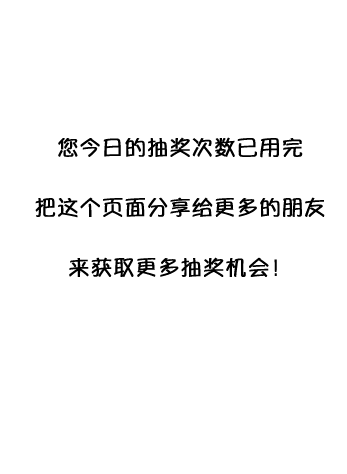
<style>
.page{position:relative;width:347px;height:474px;background:#ffffff}
.page>*{position:absolute;margin:0}
.t1{font:21.9px/60px "YuppySC-Regular";color:#000000;font-weight:bold}
</style>
<div class="page">
<p class="t1" style="left:35px;top:137px;width:290px;height:140px;text-align:center">您今日的抽奖次数已用完<br>把这个页面分享给更多的朋友<br>来获取更多抽奖机会！</p>
</div>
